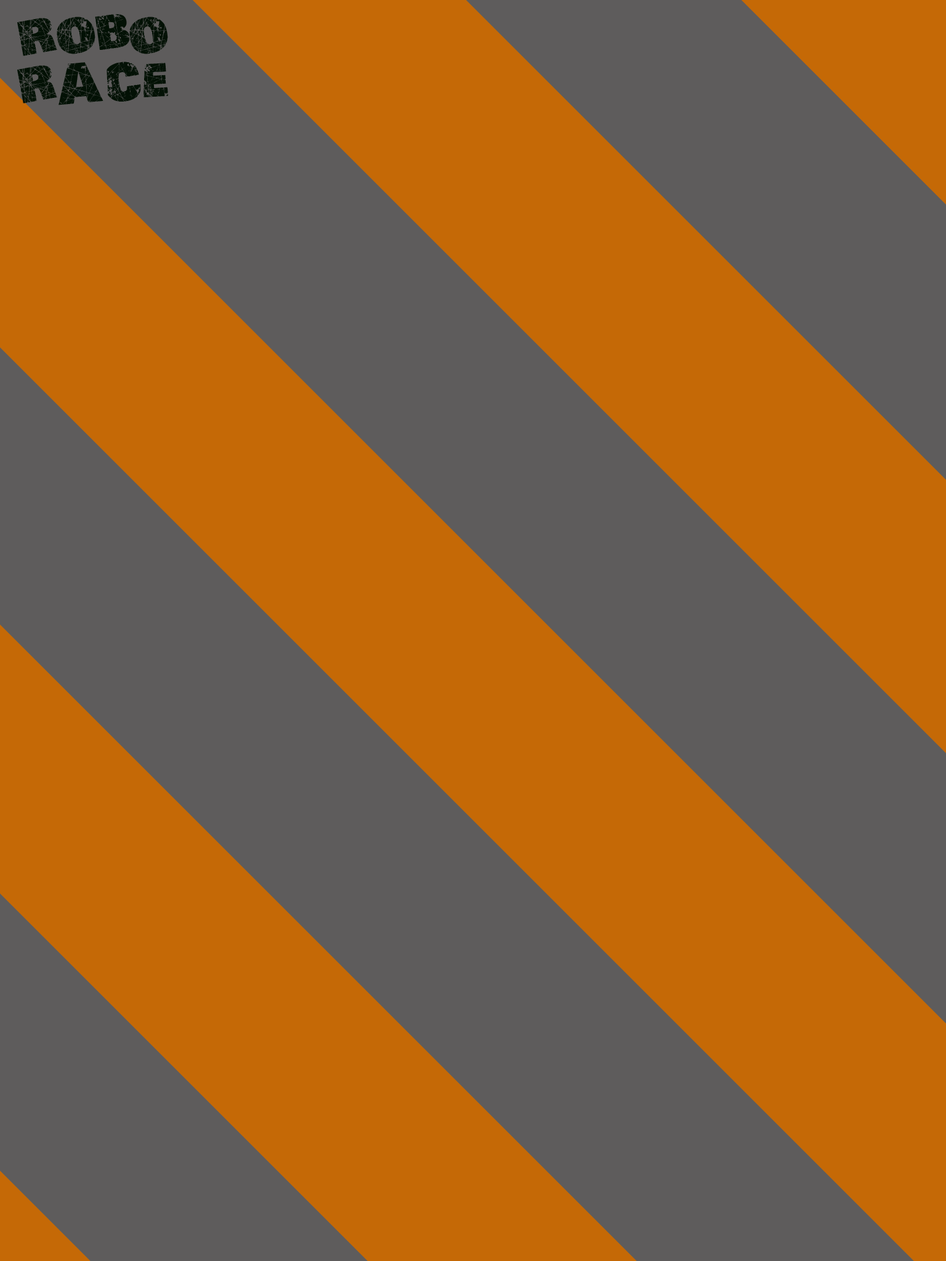
<style>
.page{position:relative;width:946px;height:1261px;background:#5e5c5c}
.page>*{position:absolute;margin:0}
.t1{font:52px/4.2px "ACTION-OF-THE-TIME";letter-spacing:-0.02em;color:#031105}
.t2{font:52px/46.9px "ACTION-OF-THE-TIME";letter-spacing:-0.02em;color:#031105}
</style>
<div class="page">
<p class="t1" style="left:17px;top:14px;width:151px;height:91px;text-align:center">ROBO<br><span class="t2">RACE</span></p>
</div>
